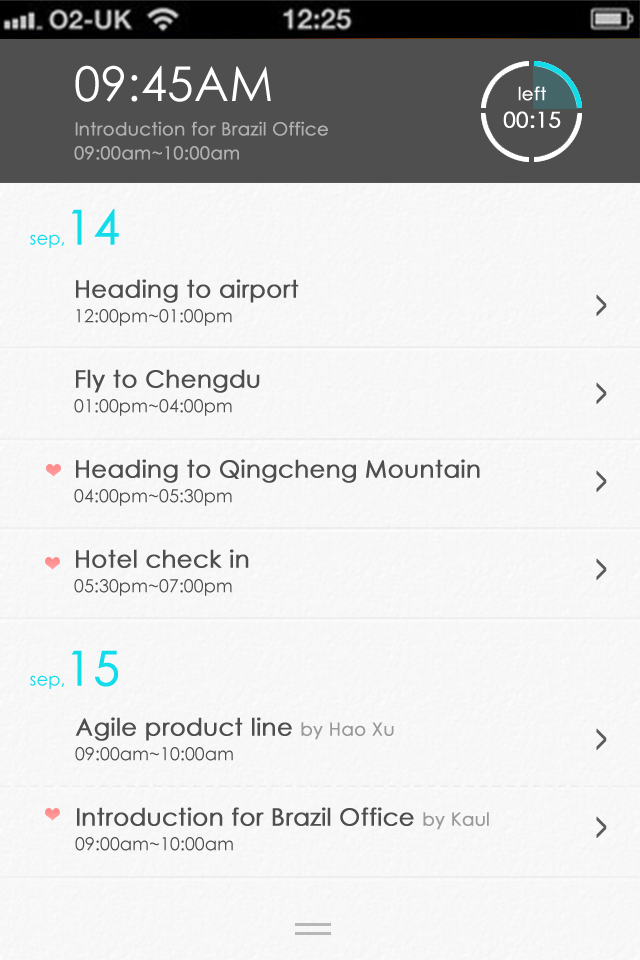
<style>
.page{position:relative;width:640px;height:960px;background:#f7f7f7}
.page>*{position:absolute;margin:0}
.t1{font:18px/24px "CenturyGothic";color:#b0b0b0;font-weight:bold}
.t2{font:48px/60px "CenturyGothic";color:#ffffff}
.t3{font:22px/24px "CenturyGothic";color:#ffffff;font-weight:bold}
.t4{font:18px/24px "CenturyGothic";color:#ffffff;font-weight:bold}
.t5{font:18px "CenturyGothic";color:#12dce9}
.t6{font:48px "CenturyGothic";color:#12dce9;font-weight:bold}
.t7{font:24px/30px "CenturyGothic";color:#4e4e4e;font-weight:bold}
.t8{font:18px/30px "CenturyGothic";color:#4e4e4e}
.t9{font:40.1px/88px "CenturyGothic";color:#5b5b5b;font-weight:bold;scale:0.45 1}
.t10{font:40.1px/170px "CenturyGothic";color:#5b5b5b;font-weight:bold;scale:0.45 1}
.t11{font:18px/30px "CenturyGothic";color:#9a9999;font-weight:bold}
</style>
<div class="page">
<p class="t1" style="left:74px;top:65px;width:254px;height:95px"><span class="t2">09:45AM<br></span>Introduction for Brazil Office<br>09:00am~10:00am</p>
<p class="t3" style="left:503px;top:86px;width:58px;height:42px;text-align:center"><span class="t4">left<br></span>00:15</p>
<p class="t5" style="left:30px;top:209px;width:89px;height:39px">sep,<span class="t6">14</span></p>
<p class="t7" style="left:74px;top:279px;width:406px;height:317px">Heading to airport<br><span class="t8">12:00pm~01:00pm<br><br></span>Fly to Chengdu<br><span class="t8">01:00pm~04:00pm<br><br></span>Heading to Qingcheng Mountain<br><span class="t8">04:00pm~05:30pm<br><br></span>Hotel check in<br><span class="t8">05:30pm~07:00pm</span></p>
<p class="t9" style="left:596px;top:294px;width:11px;height:544px">&gt;<br>&gt;<br>&gt;<br><span class="t10">&gt;<br></span>&gt;<br>&gt;</p>
<p class="t5" style="left:30px;top:650px;width:88px;height:39px">sep,<span class="t6">15</span></p>
<p class="t7" style="left:75px;top:717px;width:414px;height:134px">Agile product line <span class="t11">by Hao Xu<br></span><span class="t8">09:00am~10:00am<br><br></span>Introduction for Brazil Office <span class="t11">by Kaul<br></span><span class="t8">09:00am~10:00am</span></p>
</div>
